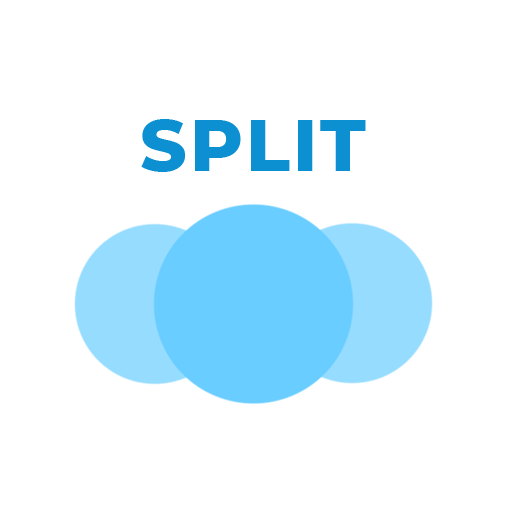
<style>
.page{position:relative;width:512px;height:512px;background:#ffffff}
.page>*{position:absolute;margin:0}
.t1{font:72px "Montserrat-ExtraBold";letter-spacing:0.04em;color:#0c90d2}
</style>
<div class="page">
<p class="t1" style="left:141px;top:119px;width:225px;height:53px">SPLIT</p>
</div>
